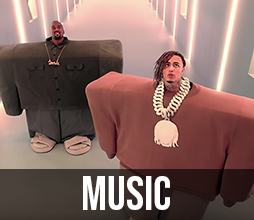
<style>
.page{position:relative;width:254px;height:220px}
.page>*{position:absolute;margin:0}
.t1{font:47.8px "BebasNeue-Regular";color:#ffffff}
</style>
<div class="page">
<p class="t1" style="left:83px;top:176px;width:87px;height:34px">Music</p>
</div>
